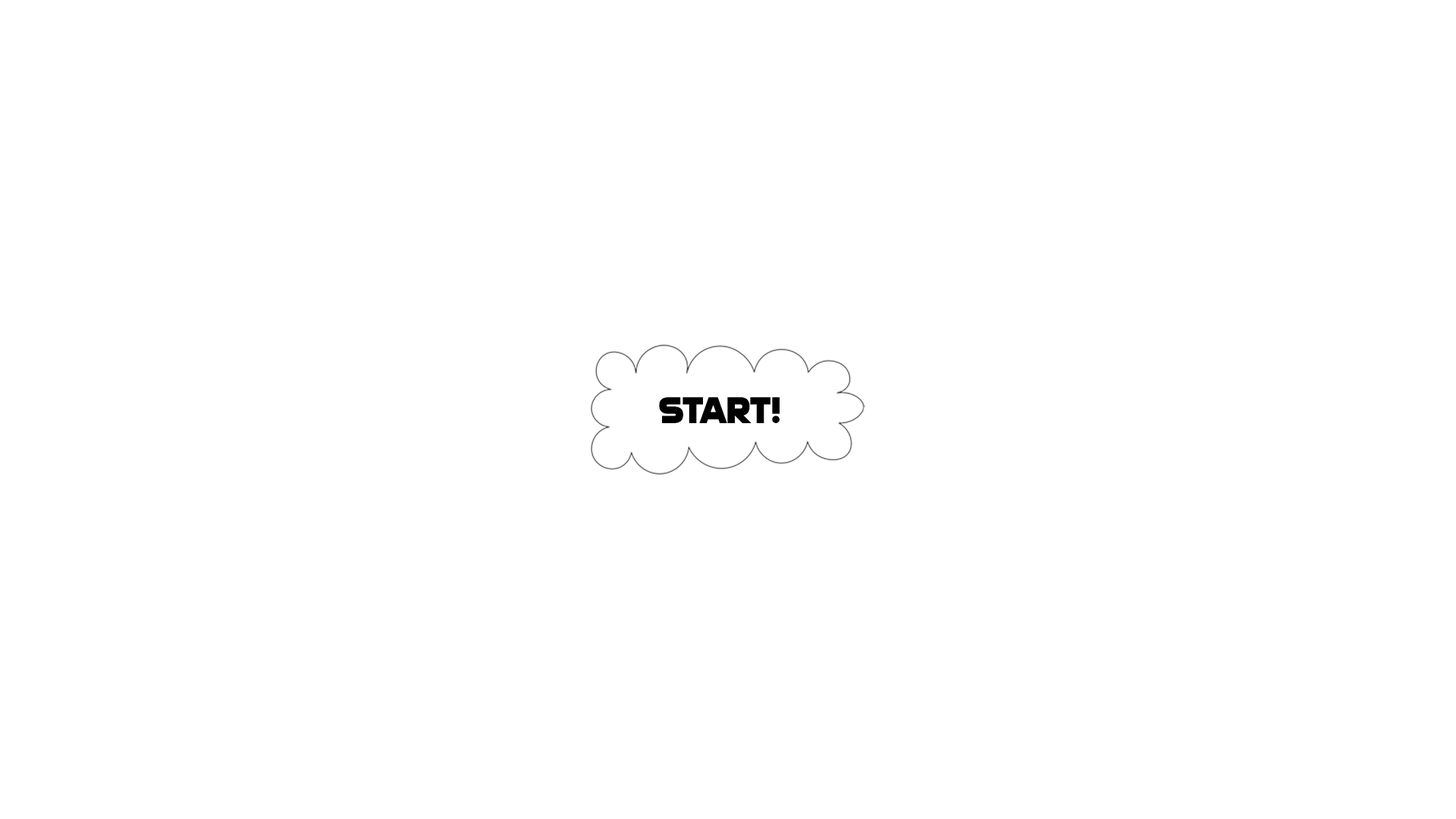
<style>
.page{position:relative;width:1456px;height:819px;background:#ffffff}
.page>*{position:absolute;margin:0}
.t1{font:37.9px "Quicksilver";color:#000000}
</style>
<div class="page">
<p class="t1" style="left:659px;top:397px;width:121px;height:26px">Start!</p>
</div>
